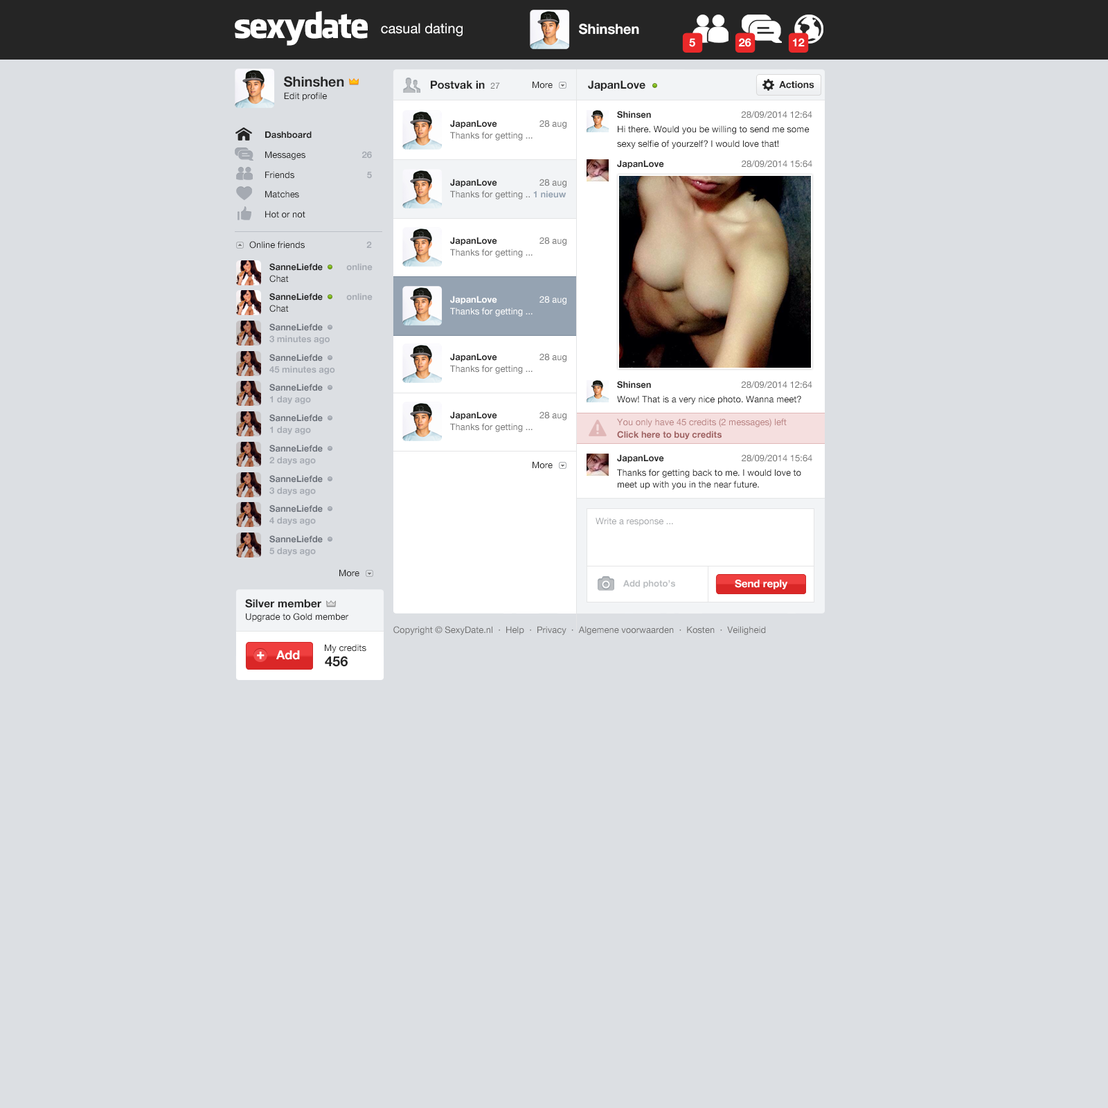
<style>
.page{position:relative;width:1108px;height:1108px;background:#dcdfe3}
.page>*{position:absolute;margin:0}
.t1{font:34.6px "FacebookLetterFaces";letter-spacing:-0.05em;color:#ffffff}
.t2{font:13.8px "HelveticaNeue";color:#ffffff}
.t3{font:13.8px "HelveticaNeue-Bold";color:#ffffff}
.t4{font:11.1px "HelveticaNeue-Bold";color:#ffffff}
.t5{font:13.8px "HelveticaNeue-Bold";color:#252525}
.t6{font:11.1px "HelveticaNeue-Bold";color:#252525}
.t7{font:8.3px "HelveticaNeue";color:#737373}
.t8{font:9px "HelveticaNeue";color:#252525}
.t9{font:9.7px "HelveticaNeue-Bold";color:#252525}
.t10{font:9px/14.5px "HelveticaNeue";color:#252525}
.t11{font:9px/11.8px "HelveticaNeue-Bold";color:#252525}
.t12{font:9px/11.8px "HelveticaNeue";color:#737373}
.t13{font:9px/20px "HelveticaNeue";color:#252525}
.t14{font:9px/20px "HelveticaNeue-Bold";color:#252525}
.t15{font:9px/20px "HelveticaNeue-Bold";color:#a5aab2}
.t16{font:9px "HelveticaNeue";color:#737373}
.t17{font:9px "HelveticaNeue-Bold";color:#252525}
.t18{font:9px/11.8px "HelveticaNeue-Bold";color:#95a3b2}
.t19{font:9px "HelveticaNeue-Bold";color:#a5aab2}
.t20{font:9px/11.8px "HelveticaNeue-Bold";color:#a5aab2}
.t21{font:9px/11.8px "HelveticaNeue";color:#252525}
.t22{font:9px/11.8px "HelveticaNeue";color:#ffffff}
.t23{font:9px/11.8px "HelveticaNeue-Bold";color:#ffffff}
.t24{font:9px/11.8px "HelveticaNeue-Bold";color:#6d727b}
.t25{font:9px/12.1px "HelveticaNeue";color:#b98282}
.t26{font:9px/12.1px "HelveticaNeue-Bold";color:#9e5f5f}
.t27{font:9px "HelveticaNeue";color:#a6a8ab}
.t28{font:9px "HelveticaNeue-Bold";color:#bbbec1}
.t29{font:10.4px "HelveticaNeue-Bold";color:#ffffff}
.t30{font:9px "HelveticaNeue";color:#707070}
.t31{font:13.2px "HelveticaNeue-Bold";color:#ffffff;font-weight:bold}
.t32{font:12.5px "HelveticaNeue-Bold";color:#ffffff}
</style>
<div class="page">
<p class="t1" style="left:235px;top:11px;width:133px;height:35px">sexydate</p>
<p class="t2" style="left:381px;top:23px;width:81px;height:14px">casual dating</p>
<p class="t3" style="left:579px;top:24px;width:60px;height:11px">Shinshen</p>
<p class="t4" style="left:689px;top:38px;width:6px;height:9px">5</p>
<p class="t4" style="left:739px;top:38px;width:12px;height:9px">26</p>
<p class="t4" style="left:793px;top:38px;width:11px;height:8px">12</p>
<p class="t5" style="left:284px;top:76px;width:60px;height:11px">Shinshen</p>
<p class="t6" style="left:431px;top:80px;width:69px;height:9px">Postvak in  <span class="t7">27</span></p>
<p class="t8" style="left:532px;top:81px;width:20px;height:8px">More</p>
<p class="t6" style="left:588px;top:80px;width:57px;height:11px">JapanLove</p>
<p class="t9" style="left:779px;top:81px;width:35px;height:8px">Actions</p>
<p class="t8" style="left:284px;top:92px;width:43px;height:9px">Edit profile</p>
<p class="t10" style="left:617px;top:111px;width:195px;height:38px"><span class="t11">Shinsen                                    </span><span class="t12">28/09/2014 12:64<br></span>Hi there. Would you be willing to send me some<br>sexy selfie of yourzelf? I would love that!</p>
<p class="t12" style="left:450px;top:120px;width:116px;height:21px"><span class="t11">JapanLove                 </span>28 aug<br>Thanks for getting ...</p>
<p class="t13" style="left:265px;top:131px;width:47px;height:87px"><span class="t14">Dashboard<br></span>Messages<br>Friends<br>Matches<br>Hot or not</p>
<p class="t15" style="left:362px;top:151px;width:10px;height:28px;text-align:right">26<br>5</p>
<p class="t16" style="left:617px;top:160px;width:195px;height:9px"><span class="t17">JapanLove                               </span>28/09/2014 15:64</p>
<p class="t12" style="left:450px;top:179px;width:116px;height:20px"><span class="t11">JapanLove                 </span>28 aug<br>Thanks for getting .. <span class="t18">1 nieuw</span></p>
<p class="t8" style="left:249px;top:241px;width:123px;height:8px">Online friends      <span class="t19">2</span></p>
<p class="t12" style="left:450px;top:237px;width:116px;height:21px"><span class="t11">JapanLove                 </span>28 aug<br>Thanks for getting ...</p>
<p class="t11" style="left:269px;top:263px;width:103px;height:19px">SanneLiefde          <span class="t20">online<br></span><span class="t21">Chat</span></p>
<p class="t11" style="left:269px;top:293px;width:103px;height:19px">SanneLiefde          <span class="t20">online<br></span><span class="t21">Chat</span></p>
<p class="t22" style="left:450px;top:296px;width:116px;height:20px"><span class="t23">JapanLove                 </span>28 aug<br>Thanks for getting ...</p>
<p class="t20" style="left:269px;top:323px;width:61px;height:21px"><span class="t24">SanneLiefde<br></span>3 minutes ago</p>
<p class="t20" style="left:269px;top:354px;width:66px;height:21px"><span class="t24">SanneLiefde<br></span>45 minutes ago</p>
<p class="t12" style="left:450px;top:353px;width:116px;height:21px"><span class="t11">JapanLove                 </span>28 aug<br>Thanks for getting ...</p>
<p class="t24" style="left:269px;top:384px;width:54px;height:20px">SanneLiefde<br><span class="t20">1 day ago</span></p>
<p class="t10" style="left:617px;top:381px;width:195px;height:23px"><span class="t11">Shinsen                                    </span><span class="t12">28/09/2014 12:64<br></span>Wow! That is a very nice photo. Wanna meet?</p>
<p class="t24" style="left:269px;top:414px;width:54px;height:21px">SanneLiefde<br><span class="t20">1 day ago</span></p>
<p class="t12" style="left:450px;top:411px;width:116px;height:21px"><span class="t11">JapanLove                 </span>28 aug<br>Thanks for getting ...</p>
<p class="t25" style="left:617px;top:418px;width:169px;height:22px">You only have 45 credits (2 messages) left<br><span class="t26">Click here to buy credits</span></p>
<p class="t24" style="left:269px;top:444px;width:54px;height:21px">SanneLiefde<br><span class="t20">2 days ago</span></p>
<p class="t8" style="left:532px;top:461px;width:20px;height:8px">More</p>
<p class="t10" style="left:617px;top:454px;width:195px;height:35px"><span class="t11">JapanLove                               </span><span class="t12">28/09/2014 15:64<br></span>Thanks for getting back to me. I would love to<br><span class="t21">meet up with you in the near future.</span></p>
<p class="t24" style="left:269px;top:475px;width:54px;height:21px">SanneLiefde<br><span class="t20">3 days ago</span></p>
<p class="t24" style="left:269px;top:505px;width:54px;height:20px">SanneLiefde<br><span class="t20">4 days ago</span></p>
<p class="t27" style="left:595px;top:517px;width:78px;height:9px">Write a response ...</p>
<p class="t24" style="left:269px;top:535px;width:54px;height:21px">SanneLiefde<br><span class="t20">5 days ago</span></p>
<p class="t8" style="left:339px;top:569px;width:20px;height:8px">More</p>
<p class="t28" style="left:623px;top:579px;width:52px;height:9px">Add photo’s</p>
<p class="t29" style="left:735px;top:579px;width:53px;height:10px">Send reply</p>
<p class="t6" style="left:245px;top:599px;width:76px;height:9px">Silver member</p>
<p class="t8" style="left:246px;top:613px;width:102px;height:9px">Upgrade to Gold member</p>
<p class="t30" style="left:393px;top:626px;width:373px;height:9px">Copyright © SexyDate.nl  ·  Help  ·  Privacy  ·  Algemene voorwaarden  ·  Kosten  ·  Veiligheid</p>
<p class="t31" style="left:257px;top:651px;width:7px;height:8px">+</p>
<p class="t32" style="left:276px;top:650px;width:24px;height:10px">Add</p>
<p class="t8" style="left:325px;top:644px;width:41px;height:9px">My credits</p>
<p class="t5" style="left:325px;top:656px;width:23px;height:11px">456</p>
</div>
